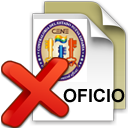
<style>
.page{position:relative;width:128px;height:128px;background:#ffffff}
.page>*{position:absolute;margin:0}
.t1{font:18px "Arial-BoldMT";color:#010101}
</style>
<div class="page">
<p class="t1" style="left:63px;top:88px;width:62px;height:15px">OFICIO</p>
</div>
